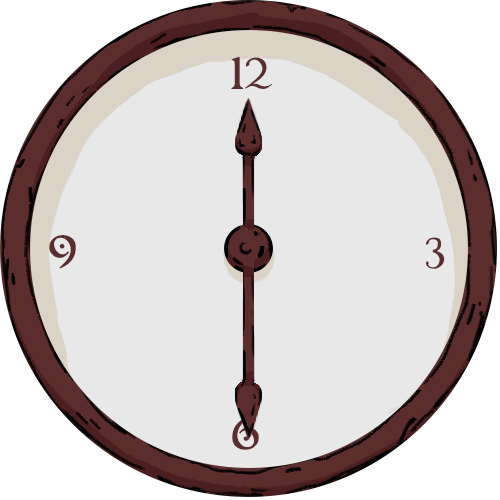
<style>
.page{position:relative;width:500px;height:500px;background:#e8e8e8}
.page>*{position:absolute;margin:0}
.t1{font:50px "FantaisieArtistique";letter-spacing:0.04em;color:#5c2d2d;scale:1.13 1}
</style>
<div class="page">
<p class="t1" style="left:231px;top:56px;width:41px;height:33px">12</p>
<p class="t1" style="left:49px;top:235px;width:27px;height:34px">9</p>
<p class="t1" style="left:426px;top:237px;width:19px;height:32px">3</p>
<p class="t1" style="left:232px;top:416px;width:27px;height:34px">6</p>
</div>
